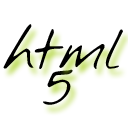
<style>
.page{position:relative;width:128px;height:128px;background:#ffffff}
.page>*{position:absolute;margin:0}
.t1{font:60px "NothingYouCouldDo";letter-spacing:-0.02em;color:#000000}
</style>
<div class="page">
<p class="t1" style="left:3px;top:24px;width:120px;height:45px">html</p>
<p class="t1" style="left:43px;top:69px;width:30px;height:36px">5</p>
</div>
